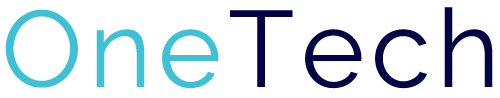
<style>
.page{position:relative;width:500px;height:98px;background:#ffffff}
.page>*{position:absolute;margin:0}
.t1{font:109px "Raleway";letter-spacing:0.06em;color:#000444}
.t2{font:109px "Raleway";letter-spacing:0.06em;color:#3ec1d5}
</style>
<div class="page">
<p class="t1" style="left:5px;top:7px;width:488px;height:82px"><span class="t2">One</span>Tech</p>
</div>
